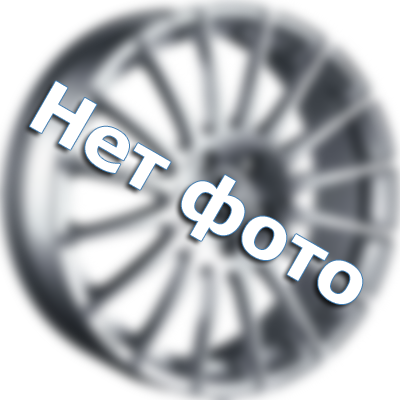
<style>
.page{position:relative;width:400px;height:400px}
.page>*{position:absolute;margin:0}
.t1{font:72px "Verdana-Bold";color:#ffffff}
</style>
<div class="page">
<p class="t1" style="left:29px;top:81px;width:334px;height:223px;rotate:30deg">Нет фото</p>
</div>
